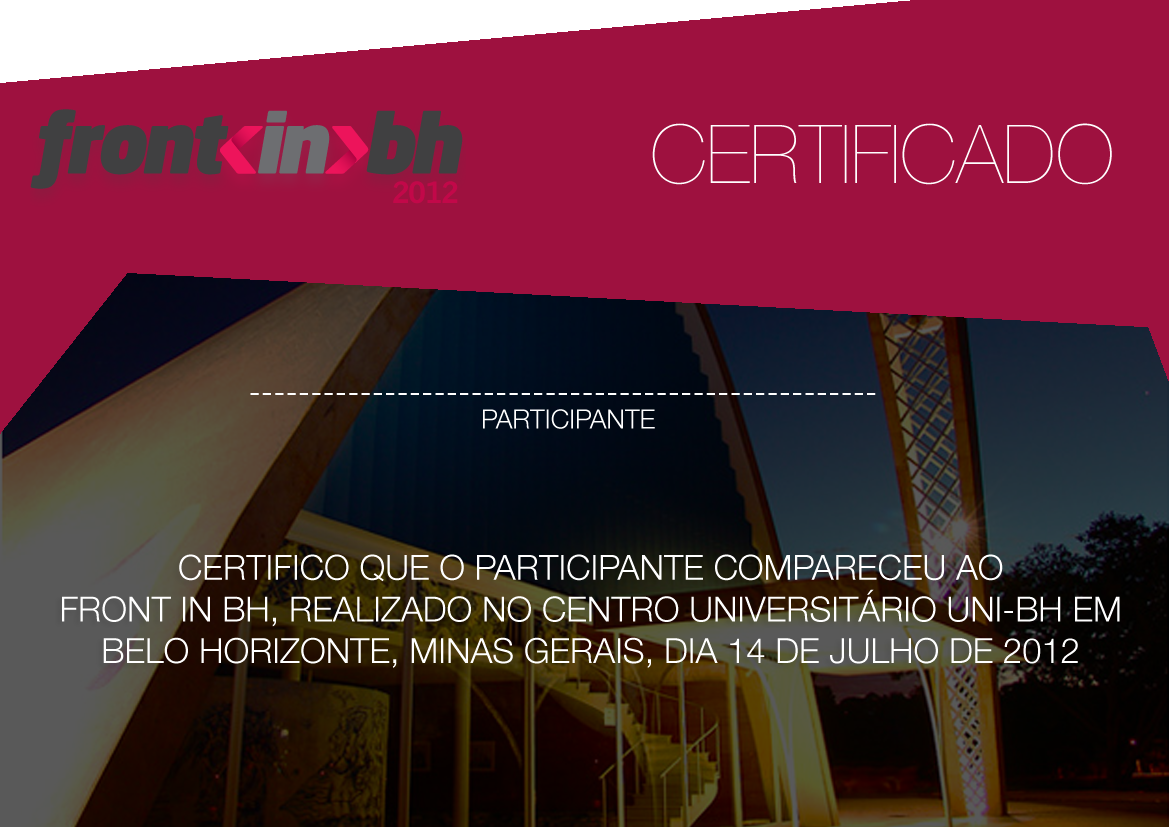
<style>
.page{position:relative;width:1169px;height:827px;background:#9e113f}
.page>*{position:absolute;margin:0}
.t1{font:81.4px "HelveticaNeue-UltraLight";color:#ffffff}
.t2{font:33.3px "HelveticaNeue-Light";color:#ffffff}
.t3{font:26.4px "HelveticaNeue-Light";color:#ffffff}
.t4{font:34.7px "HelveticaNeue-Light";color:#ffffff}
</style>
<div class="page">
<p class="t1" style="left:652px;top:123px;width:460px;height:62px">CERTIFICADO</p>
<p class="t2" style="left:250px;top:393px;width:626px;height:2px">---------------------------------------------------</p>
<p class="t3" style="left:483px;top:409px;width:172px;height:20px">PARTICIPANTE</p>
<p class="t4" style="left:62px;top:554px;width:1058px;height:114px;text-align:center">CERTIFICO QUE O PARTICIPANTE COMPARECEU AO <br>FRONT IN BH, REALIZADO NO CENTRO UNIVERSITÁRIO UNI-BH EM BELO HORIZONTE, MINAS GERAIS, DIA 14 DE JULHO DE 2012</p>
</div>
